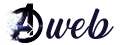
<style>
.page{position:relative;width:121px;height:45px;background:#ffffff}
.page>*{position:absolute;margin:0}
.t1{font:39.7px "Hestina";letter-spacing:0.025em;color:#141032}
</style>
<div class="page">
<p class="t1" style="left:46px;top:8px;width:68px;height:31px">web</p>
</div>
